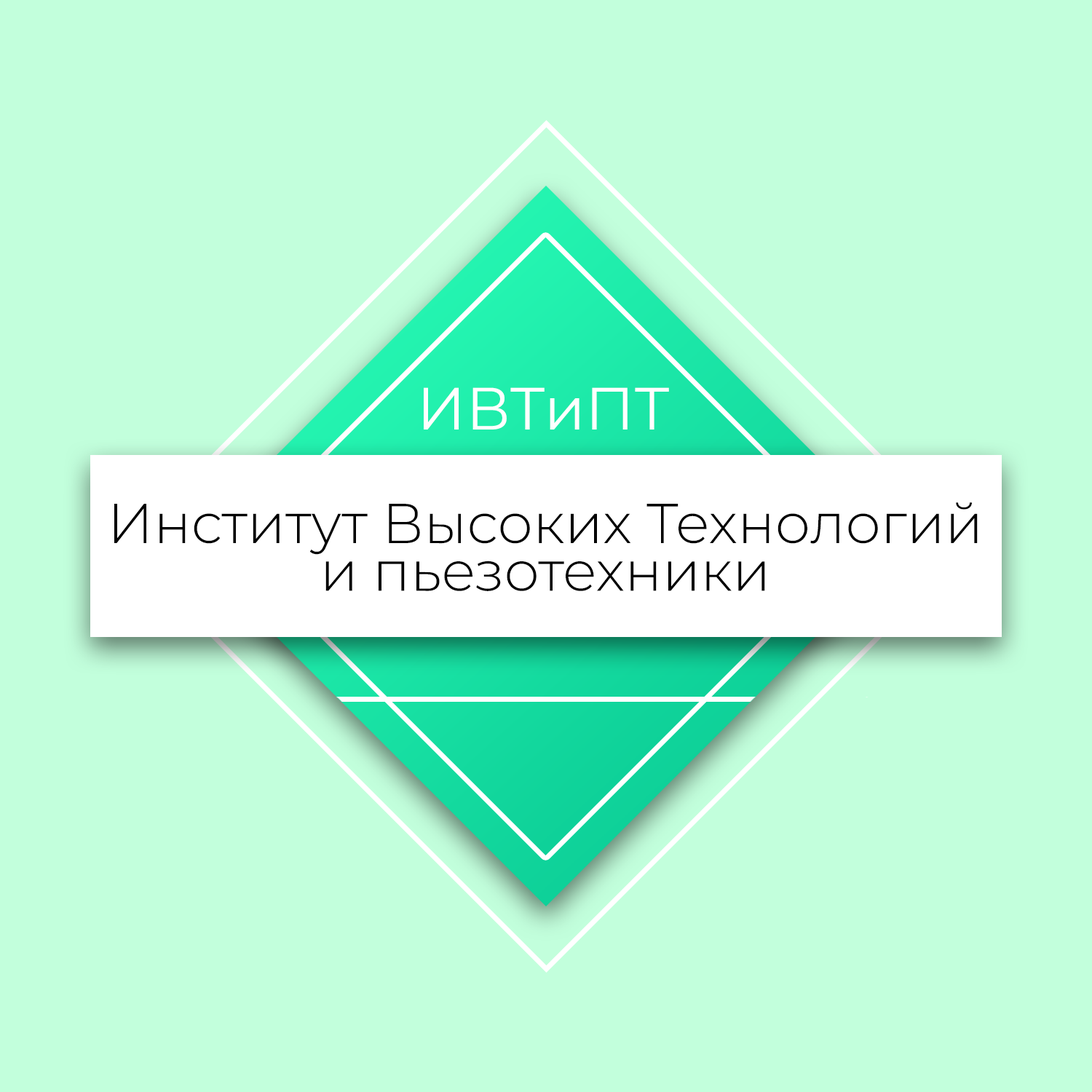
<style>
.page{position:relative;width:1092px;height:1092px;background:#c2ffdc}
.page>*{position:absolute;margin:0}
.t1{font:59.7px "Montserrat-Regular";color:#ffffff}
.t2{font:56.1px/47.7px "Montserrat-Light";color:#000000}
</style>
<div class="page">
<p class="t1" style="left:424px;top:387px;width:245px;height:43px">ИВТиПТ</p>
<p class="t2" style="left:114px;top:502px;width:864px;height:89px;text-align:center">Институт Высоких Технологий<br>и пьезотехники</p>
</div>
